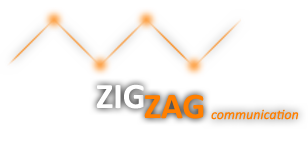
<style>
.page{position:relative;width:308px;height:142px;background:#ffffff}
.page>*{position:absolute;margin:0}
.t1{font:36px "Calibri-Bold";color:#ffffff}
.t2{font:36px "Calibri-Bold";color:#ff8000}
.t3{font:14px "Calibri-Italic";color:#ff8000}
</style>
<div class="page">
<p class="t1" style="left:96px;top:84px;width:48px;height:25px">ZIG</p>
<p class="t2" style="left:144px;top:94px;width:60px;height:25px">ZAG</p>
<p class="t3" style="left:211px;top:109px;width:88px;height:11px">communication</p>
</div>
